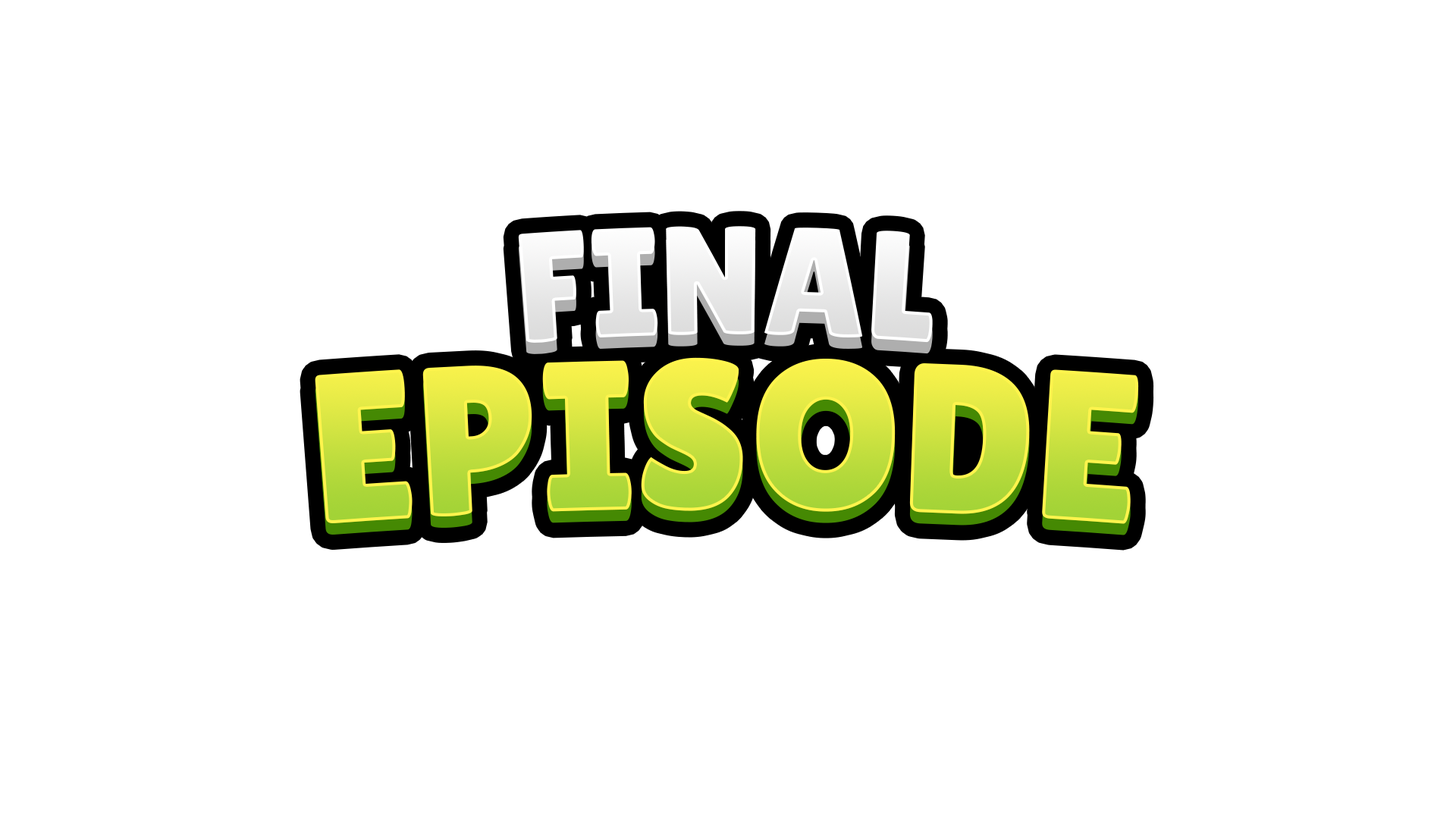
<style>
.page{position:relative;width:1456px;height:819px;background:#ffffff}
.page>*{position:absolute;margin:0}
.t1{font:154.5px "LilitaOne";color:#f1f1f1}
.t2{font:212.6px "LilitaOne"}
</style>
<div class="page">
<p class="t1" style="left:518px;top:226px;width:415px;height:117px">FINAL</p>
<p class="t2" style="left:315px;top:357px;width:824px;height:167px">EPISODE</p>
</div>
